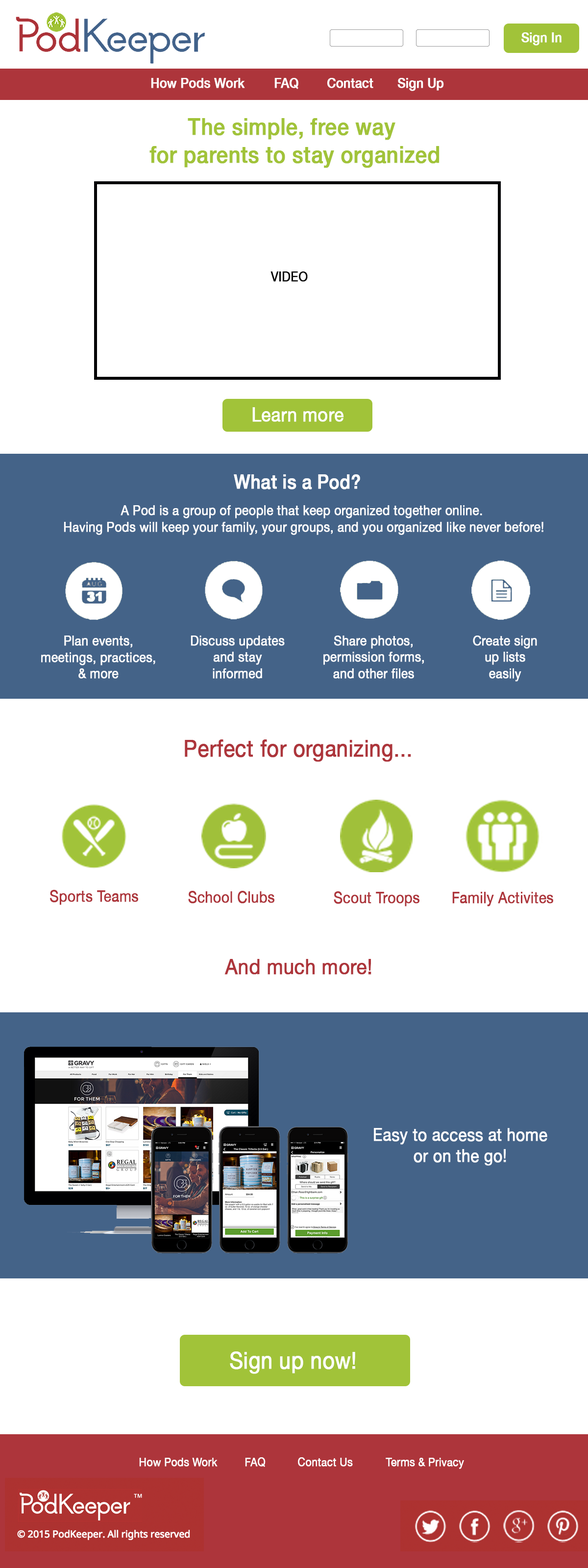
<style>
.page{position:relative;width:588px;height:1568px;background:#ffffff}
.page>*{position:absolute;margin:0}
.t1{font:13.7px "HelveticaNeue-Medium";color:#ffffff;font-weight:bold;scale:0.88 1}
.t2{font:23.5px "HelveticaNeue-Medium";color:#a1c339;font-weight:bold;scale:0.88 1}
.t3{font:13.7px "HelveticaNeue";color:#000000;font-weight:bold;scale:0.88 1}
.t4{font:19.6px "HelveticaNeue";color:#ffffff;font-weight:bold;scale:0.88 1}
.t5{font:19.6px "HelveticaNeue-Medium";color:#ffffff;font-weight:bold;scale:0.88 1}
.t6{font:13.7px "HelveticaNeue";color:#ffffff;font-weight:bold;scale:0.88 1}
.t7{font:23.5px "HelveticaNeue";color:#ad353b;font-weight:bold;scale:0.88 1}
.t8{font:15.7px "HelveticaNeue";color:#ad353b;font-weight:bold;scale:0.88 1}
.t9{font:21.6px "HelveticaNeue";color:#ad353b;font-weight:bold;scale:0.88 1}
.t10{font:17.6px "HelveticaNeue";color:#ffffff;font-weight:bold;scale:0.88 1}
.t11{font:23.5px "HelveticaNeue";color:#ffffff;font-weight:bold;scale:0.88 1}
.t12{font:11.8px "HelveticaNeue";color:#ffffff;font-weight:bold;scale:0.88 1}
</style>
<div class="page">
<p class="t1" style="left:521px;top:32px;width:41px;height:14px">Sign In</p>
<p class="t1" style="left:151px;top:78px;width:293px;height:13px">How Pods Work  FAQ  Contact  Sign Up</p>
<p class="t2" style="left:149px;top:118px;width:291px;height:50px;text-align:center">The simple, free way <br>for parents to stay organized</p>
<p class="t3" style="left:270px;top:271px;width:38px;height:11px">VIDEO</p>
<p class="t4" style="left:252px;top:407px;width:92px;height:15px">Learn more</p>
<p class="t5" style="left:234px;top:474px;width:126px;height:16px">What is a Pod?</p>
<p class="t6" style="left:64px;top:505px;width:479px;height:30px;text-align:center">A Pod is a group of people that keep organized together online. <br>Having Pods will keep your family, your groups, and you organized like never before!</p>
<p class="t6" style="left:41px;top:636px;width:114px;height:43px;text-align:center">Plan events,<br>meetings, practices,<br>&amp; more</p>
<p class="t6" style="left:191px;top:636px;width:94px;height:43px;text-align:center">Discuss updates<br>and stay<br>informed</p>
<p class="t6" style="left:323px;top:636px;width:101px;height:43px;text-align:center">Share photos,<br>permission forms,<br>and other files</p>
<p class="t6" style="left:473px;top:636px;width:64px;height:46px;text-align:center">Create sign<br>up lists<br>easily</p>
<p class="t7" style="left:185px;top:739px;width:226px;height:23px">Perfect for organizing...</p>
<p class="t8" style="left:50px;top:890px;width:88px;height:15px">Sports Teams</p>
<p class="t8" style="left:188px;top:891px;width:86px;height:13px">School Clubs</p>
<p class="t8" style="left:334px;top:891px;width:85px;height:15px">Scout Troops</p>
<p class="t8" style="left:452px;top:892px;width:101px;height:14px">Family Activites</p>
<p class="t9" style="left:224px;top:959px;width:147px;height:16px">And much more!</p>
<p class="t10" style="left:374px;top:1128px;width:173px;height:38px;text-align:center">Easy to access at home<br>or on the go!</p>
<p class="t11" style="left:230px;top:1351px;width:125px;height:23px">Sign up now!</p>
<p class="t12" style="left:139px;top:1457px;width:325px;height:12px">How Pods Work  FAQ  Contact Us  Terms &amp; Privacy</p>
</div>
